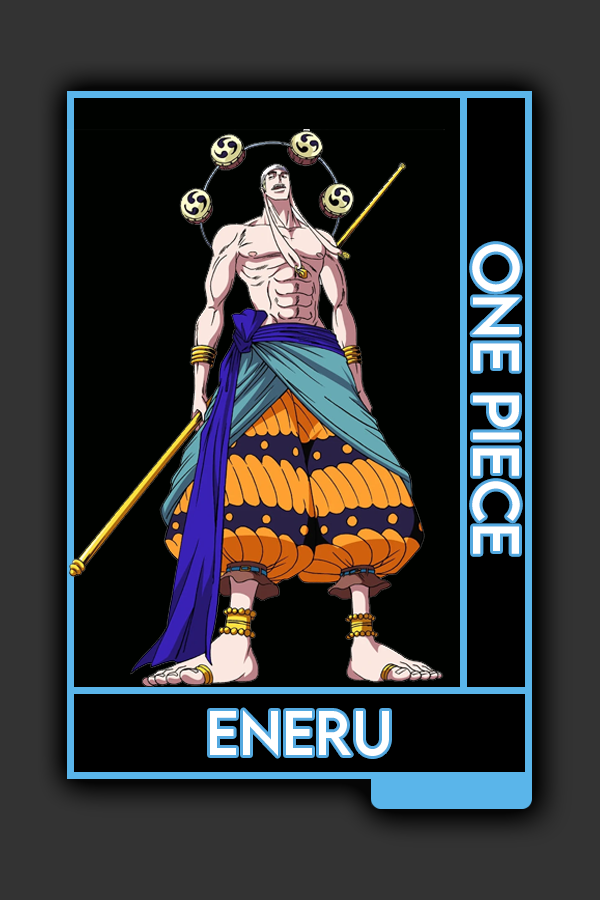
<style>
.page{position:relative;width:600px;height:900px;background:#000200}
.page>*{position:absolute;margin:0}
.t1{font:58.4px "LEMONMILK-Regular";color:#ffffff}
.t2{font:55.4px "LEMONMILK-Regular";color:#ffffff}
</style>
<div class="page">
<p class="t1" style="left:472px;top:244px;width:48px;height:310px;rotate:90deg">One Piece</p>
<p class="t2" style="left:210px;top:710px;width:179px;height:46px">Eneru</p>
</div>
